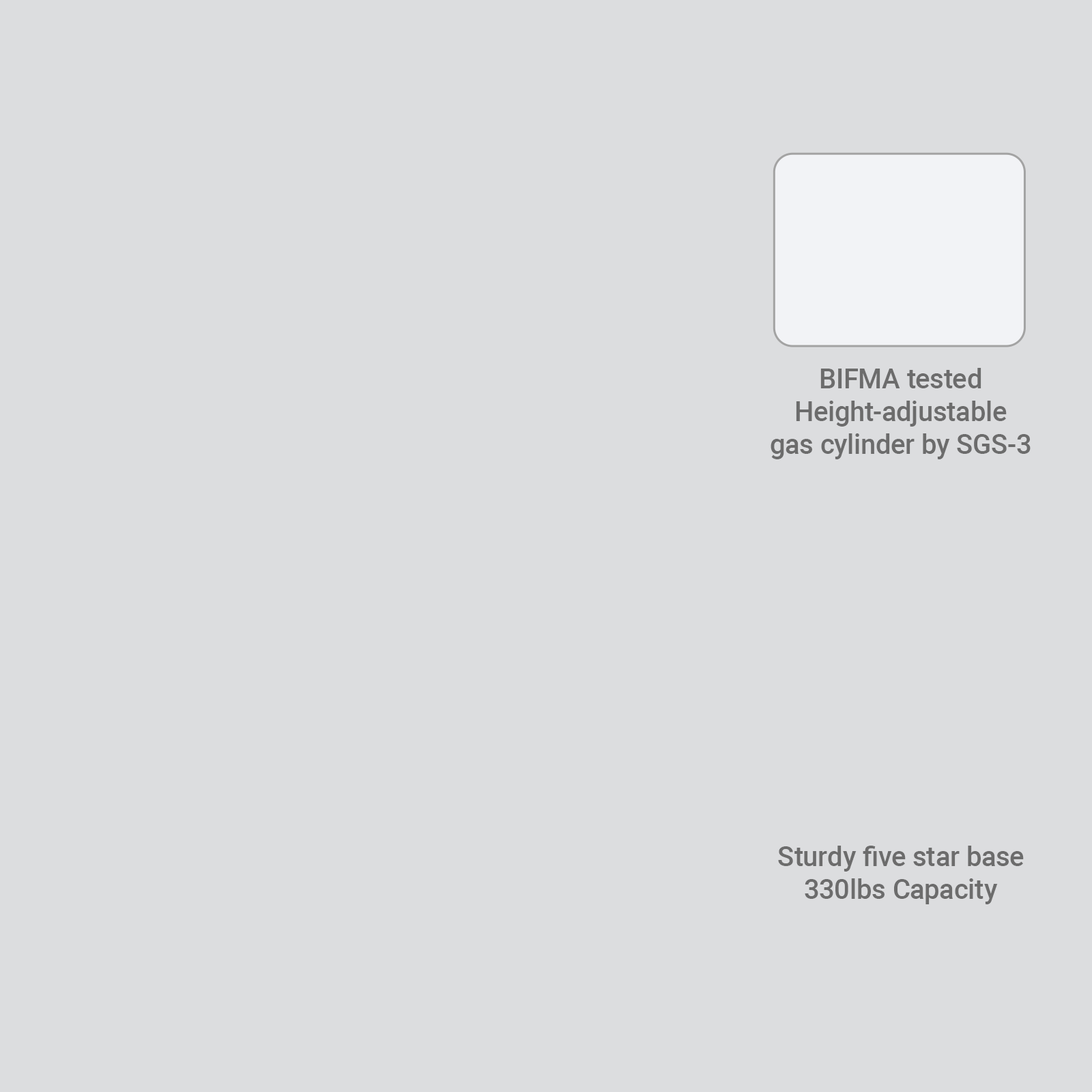
<style>
.page{position:relative;width:1092px;height:1092px;background:#dcdddf}
.page>*{position:absolute;margin:0}
.t1{font:27.2px "Roboto-Medium";color:#6c6c6c}
</style>
<div class="page">
<p class="t1" style="left:771px;top:368px;width:260px;height:91px;text-align:center">BIFMA tested<br>Height-adjustable<br>gas cylinder by SGS-3</p>
<p class="t1" style="left:778px;top:846px;width:246px;height:58px;text-align:center">Sturdy five star base<br>330lbs Capacity</p>
</div>
